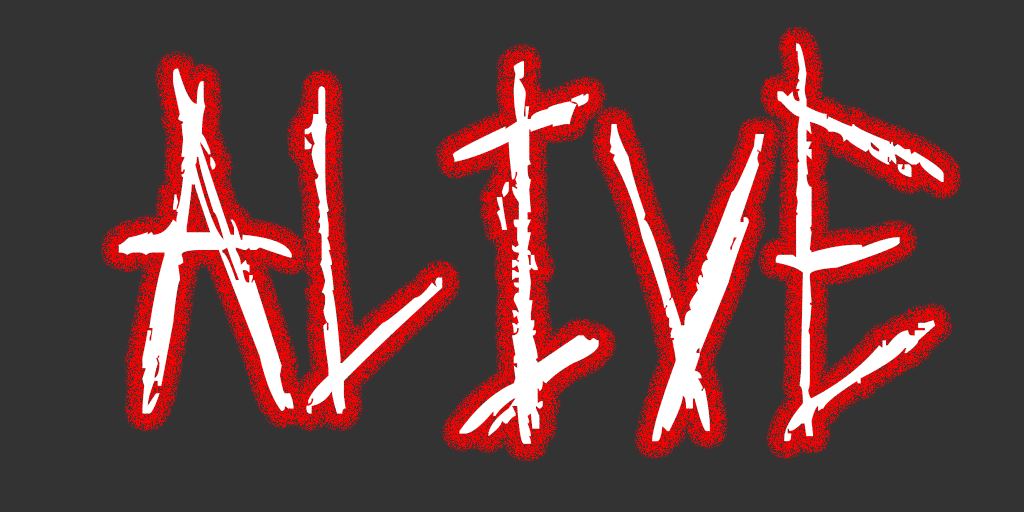
<style>
.page{position:relative;width:1024px;height:512px;background:#333333}
.page>*{position:absolute;margin:0}
.t1{font:245.1px "LastNLine";color:#ffffff;scale:0.67 1}
</style>
<div class="page">
<p class="t1" style="left:118px;top:43px;width:826px;height:401px">ALIVE</p>
</div>
